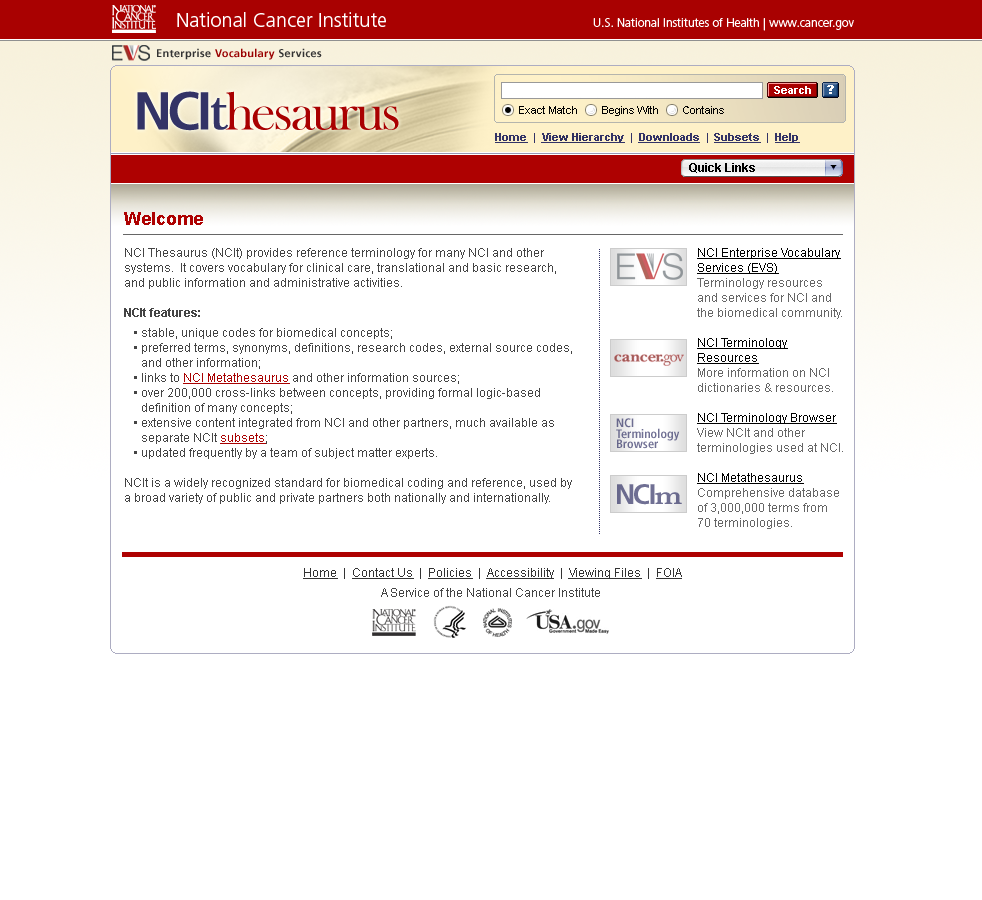
<style>
.page{position:relative;width:982px;height:900px;background:#ffffff}
.page>*{position:absolute;margin:0}
.t1{font:11px "FrutigerLTStd-Bold";letter-spacing:0.025em;color:#333333}
.t2{font:11px "FrutigerLTStd-Bold";letter-spacing:0.025em;color:#990000}
.t3{font:11px "Arial-BoldMT";color:#ffffff}
.t4{font:12px "Arial-BoldMT";color:#ffffff;font-weight:bold}
.t5{font:11px "ArialMT";color:#000000}
.t6{font:11px "Arial-BoldMT";color:#333367;text-decoration:underline}
.t7{font:11px "Arial-BoldMT";color:#333367}
.t8{font:11px "Arial-BoldMT";color:#2f2f5f;text-decoration:underline}
.t9{font:12px "Arial-BoldMT";color:#000000}
.t10{font:18px "Arial-BoldMT";color:#ae0101}
.t11{font:12px/15px "ArialMT";color:#444444}
.t12{font:12px/15px "Arial-BoldMT";color:#444444}
.t13{font:12px/15px "ArialMT";color:#a90101;text-decoration:underline}
.t14{font:12px/15px "ArialMT";color:#666666}
.t15{font:12px/15px "ArialMT";color:#000000;text-decoration:underline}
.t16{font:12px/15px "ArialMT";color:#000000}
.t17{font:12.3px/6.2px "FrutigerLTStd-BoldCn";color:#6e6e92}
.t18{font:28.2px "FrutigerLTStd-Bold";letter-spacing:-0.05em;color:#6e6e92}
.t19{font:28.2px "FrutigerLTStd-Bold";letter-spacing:-0.1em;color:#6e6e92}
.t20{font:28.2px "Baskerville-SemiBold";letter-spacing:-0.05em;color:#6e6e92}
.t21{font:12px/10px "ArialMT";color:#444444}
.t22{font:12px/10px "ArialMT";color:#333333}
.t23{font:12px/10px "ArialMT";color:#333333;text-decoration:underline}
</style>
<div class="page">
<p class="t1" style="left:157px;top:48px;width:165px;height:12px">Enterprise <span class="t2">Vocabulary </span>Services</p>
<p class="t3" style="left:774px;top:86px;width:37px;height:8px">Search</p>
<p class="t4" style="left:827px;top:85px;width:7px;height:9px">?</p>
<p class="t5" style="left:519px;top:106px;width:205px;height:10px">Exact Match        Begins With        Contains</p>
<p class="t6" style="left:495px;top:133px;width:305px;height:10px">Home<span class="t7">  |  </span>Vie<span class="t8">w Hie</span>rarchy<span class="t7">  |  </span>Downloads<span class="t7">  |  </span>Subsets<span class="t7">  |  </span>Help</p>
<p class="t9" style="left:689px;top:163px;width:66px;height:10px">Quick Links</p>
<p class="t10" style="left:124px;top:212px;width:79px;height:13px">Welcome</p>
<p class="t11" style="left:124px;top:248px;width:448px;height:256px">NCI Thesaurus (NCIt) provides reference terminology for many NCI and other <br>systems.  It covers vocabulary for clinical care, translational and basic research, <br>and public information and administrative activities.<br><br><span class="t12">NCIt features:<br><br></span>• stable, unique codes for biomedical concepts;<br>• preferred terms, synonyms, definitions, research codes, external source codes, <br>  and other information;<br>• links to <span class="t13">NCI Metathesaurus</span> and other information sources;<br>• over 200,000 cross-links between concepts, providing formal logic-based <br>  definition of many concepts; <br>• extensive content integrated from NCI and other partners, much available as<br>  separate NCIt <span class="t13">subsets</span>;<br>• updated frequently by a team of subject matter experts.<br><br>NCIt is a widely recognized standard for biomedical coding and reference, used by<br>a broad variety of public and private partners both nationally and internationally.</p>
<p class="t14" style="left:697px;top:248px;width:146px;height:281px"><span class="t15">NCI Enterprise Vocabulary<br>Services (EVS)<br></span>Terminology resources <br>and services for NCI and<br>the biomedical community.<br><br><span class="t15">NCI Terminology Resources</span><span class="t16"> <br></span>More information on NCI <br>dictionaries &amp; resources.<br><br><span class="t15">NCI Terminology Browser<br></span>View NCIt and other<br>terminologies used at NCI.<br><br><span class="t15">NCI Metathesaurus<br></span>Comprehensive database<br>of 3,000,000 terms from<br>70 terminologies.</p>
<p class="t17" style="left:616px;top:418px;width:64px;height:31px">NCI<br>Terminology <br>Browser</p>
<p class="t18" style="left:617px;top:484px;width:65px;height:21px"><span class="t19">N</span>CI<span class="t20">m</span></p>
<p class="t21" style="left:303px;top:568px;width:379px;height:29px;text-align:center"><span class="t22"> </span><span class="t23">Home</span><span class="t22">  |  </span><span class="t23">Contact Us</span><span class="t22">  |  </span><span class="t23">Policies</span><span class="t22">  |  </span><span class="t23">Accessibility</span><span class="t22">  |  </span><span class="t23">Viewing Files</span><span class="t22">  |  </span><span class="t23">FOIA<br></span><br>A Service of the National Cancer Institute</p>
</div>
